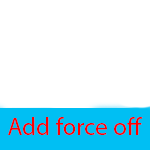
<style>
.page{position:relative;width:150px;height:150px;background:#ffffff}
.page>*{position:absolute;margin:0}
.t1{font:25px "MyriadPro-Regular";color:#ff0000}
</style>
<div class="page">
<p class="t1" style="left:8px;top:117px;width:135px;height:18px">Add force off</p>
</div>
